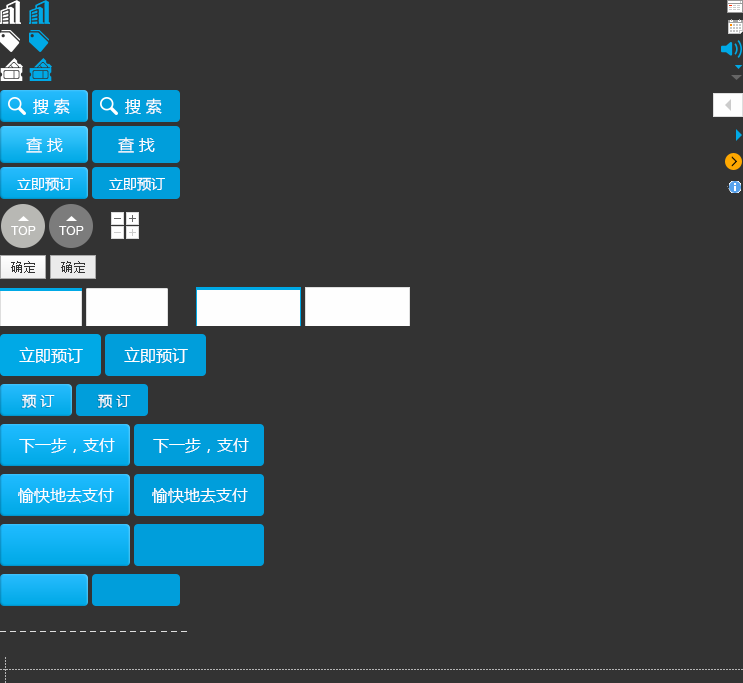
<style>
.page{position:relative;width:743px;height:683px;background:#333333}
.page>*{position:absolute;margin:0}
.t1{font:16px "MicrosoftYaHei";letter-spacing:0.3em;color:#ffffff}
.t2{font:14px "MicrosoftYaHei";color:#ffffff}
.t3{font:12px "ArialMT";color:#ffffff}
.t4{font:13px "SimSun";color:#333333}
.t5{font:16px "MicrosoftYaHei";color:#ffffff}
</style>
<div class="page">
<p class="t1" style="left:33px;top:98px;width:37px;height:16px">搜索</p>
<p class="t1" style="left:125px;top:98px;width:37px;height:16px">搜索</p>
<p class="t1" style="left:26px;top:137px;width:37px;height:16px">查找</p>
<p class="t1" style="left:118px;top:137px;width:37px;height:16px">查找</p>
<p class="t2" style="left:17px;top:177px;width:56px;height:14px">立即预订</p>
<p class="t2" style="left:109px;top:177px;width:56px;height:14px">立即预订</p>
<p class="t3" style="left:11px;top:226px;width:25px;height:9px">TOP</p>
<p class="t3" style="left:59px;top:226px;width:25px;height:9px">TOP</p>
<p class="t4" style="left:11px;top:261px;width:24px;height:12px">确定</p>
<p class="t4" style="left:61px;top:261px;width:24px;height:12px">确定</p>
<p class="t5" style="left:19px;top:347px;width:64px;height:16px">立即预订</p>
<p class="t5" style="left:124px;top:347px;width:64px;height:16px">立即预订</p>
<p class="t2" style="left:22px;top:394px;width:33px;height:14px">预 订</p>
<p class="t2" style="left:98px;top:394px;width:33px;height:14px">预 订</p>
<p class="t5" style="left:19px;top:438px;width:96px;height:15px">下一步，支付</p>
<p class="t5" style="left:153px;top:438px;width:96px;height:15px">下一步，支付</p>
<p class="t5" style="left:18px;top:488px;width:96px;height:15px">愉快地去支付</p>
<p class="t5" style="left:152px;top:488px;width:96px;height:15px">愉快地去支付</p>
</div>
